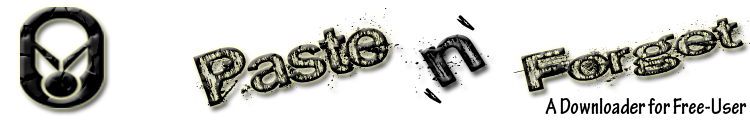
<style>
.page{position:relative;width:750px;height:120px;background:#ffffff}
.page>*{position:absolute;margin:0}
.t1{font:73.6px "SEXtalk69";color:#000000;scale:1.25 1}
.t2{font:21.7px "SEXtalk69";color:#000000;scale:7.2 1}
.t3{font:81px "SEXtalk69";color:#000000;scale:1.4 1}
.t4{font:23.4px "TektonPro-BoldCond";color:#000000;scale:0.96 1}
</style>
<div class="page">
<p class="t1" style="left:193px;top:8px;width:200px;height:99px;rotate:-14deg">Paste</p>
<p class="t2" style="left:456px;top:15px;width:19px;height:16px;rotate:44deg">,</p>
<p class="t3" style="left:394px;top:34px;width:95px;height:59px;rotate:-28deg">n</p>
<p class="t2" style="left:423px;top:88px;width:19px;height:16px;rotate:44deg">,</p>
<p class="t4" style="left:545px;top:98px;width:202px;height:16px">A Downloader for Free-User</p>
</div>
